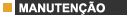
<style>
.page{position:relative;width:127px;height:15px;background:#333333}
.page>*{position:absolute;margin:0}
.t1{font:12px "Arial-BoldMT";color:#ffffff}
</style>
<div class="page">
<p class="t1" style="left:19px;top:1px;width:86px;height:14px">MANUTENÇÃO</p>
</div>
